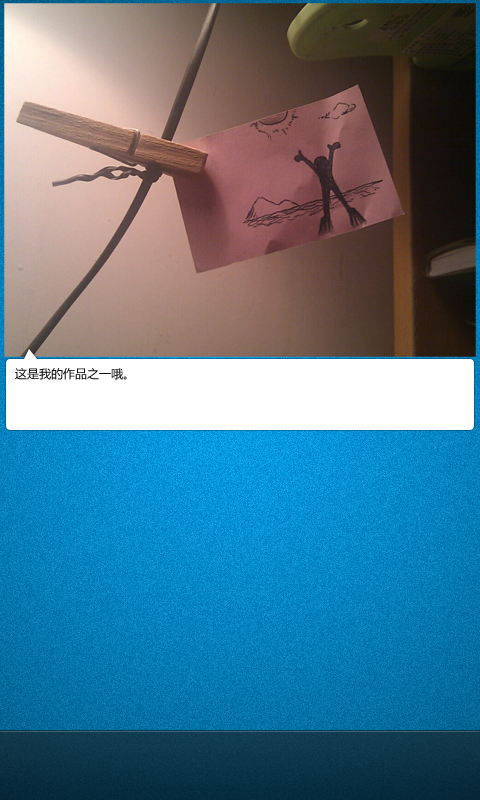
<style>
.page{position:relative;width:480px;height:800px}
.page>*{position:absolute;margin:0}
.t1{font:12px "MicrosoftYaHei";color:#0a0a0a}
</style>
<div class="page">
<p class="t1" style="left:15px;top:367px;width:112px;height:13px">这是我的作品之一哦。</p>
</div>
